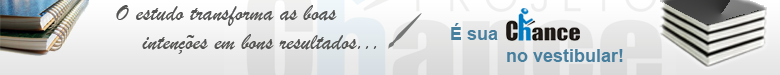
<style>
.page{position:relative;width:780px;height:75px}
.page>*{position:absolute;margin:0}
.t1{font:24px "BrushScriptMT";color:#545453}
.t2{font:18px "Arial-BoldMT";color:#477f9f}
</style>
<div class="page">
<p class="t1" style="left:116px;top:5px;width:261px;height:49px">O estudo transforma as boas <br>    intenções em bons resultados...</p>
<p class="t2" style="left:451px;top:23px;width:47px;height:17px">É sua</p>
<p class="t2" style="left:507px;top:49px;width:116px;height:13px">no vestibular!</p>
</div>
